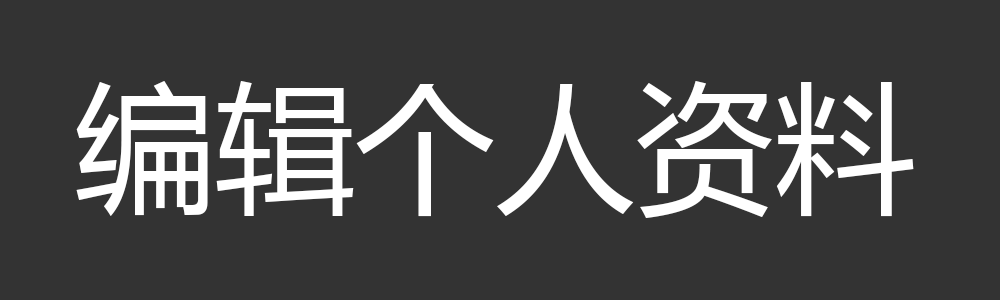
<style>
.page{position:relative;width:1000px;height:300px;background:#333333}
.page>*{position:absolute;margin:0}
.t1{font:140px "MicrosoftYaHei";color:#ffffff}
</style>
<div class="page">
<p class="t1" style="left:76px;top:81px;width:838px;height:137px">编辑个人资料</p>
</div>
